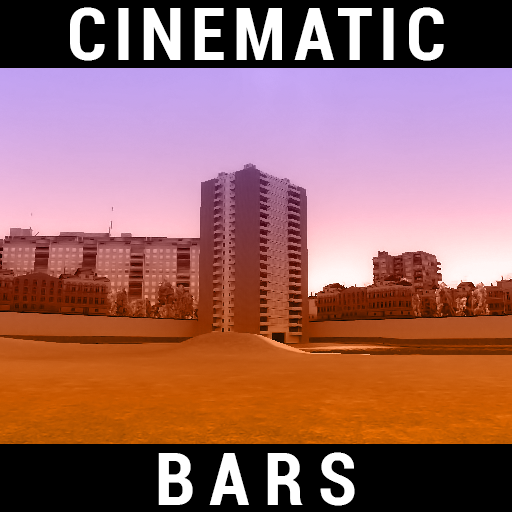
<style>
.page{position:relative;width:512px;height:512px;background:#000000}
.page>*{position:absolute;margin:0}
.t1{font:72px "Roboto-BoldCondensed";letter-spacing:0.1em;color:#ffffff}
.t2{font:72px "Roboto-BoldCondensed";letter-spacing:0.2em;color:#ffffff}
</style>
<div class="page">
<p class="t1" style="left:70px;top:7px;width:374px;height:54px">CINEMATIC</p>
<p class="t2" style="left:158px;top:452px;width:197px;height:54px">BARS</p>
</div>
